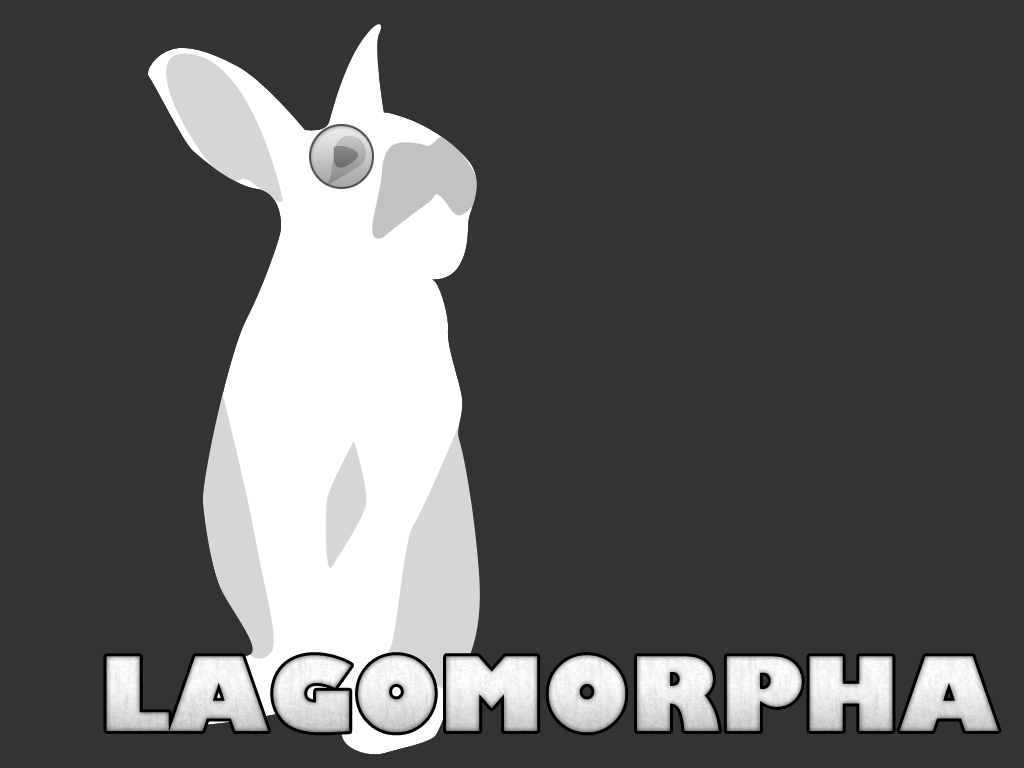
<style>
.page{position:relative;width:1024px;height:768px;background:#333333}
.page>*{position:absolute;margin:0}
.t1{font:100px "GillSans-UltraBold"}
</style>
<div class="page">
<p class="t1" style="left:106px;top:655px;width:893px;height:78px">LAGOMORPHA</p>
</div>
